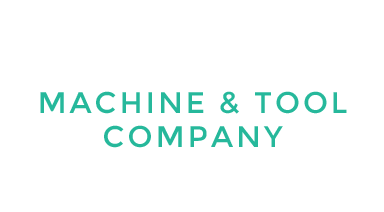
<style>
.page{position:relative;width:384px;height:212px;background:#ffffff}
.page>*{position:absolute;margin:0}
.t1{font:29.7px/29.7px "Montserrat-Regular";letter-spacing:0.1em;color:#26b89b;text-transform:uppercase}
</style>
<div class="page">
<p class="t1" style="left:40px;top:91px;width:307px;height:57px;text-align:center">machine &amp; tool<br>company</p>
</div>
